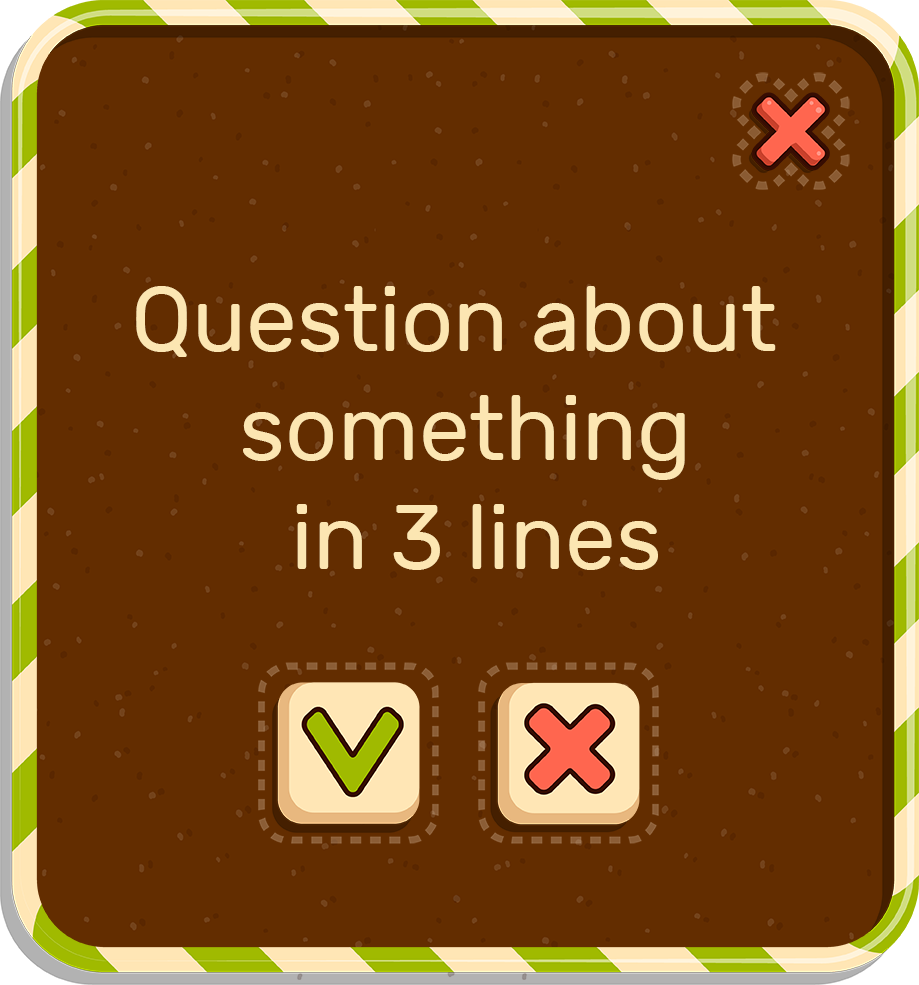
<style>
.page{position:relative;width:919px;height:985px;background:#632d00}
.page>*{position:absolute;margin:0}
.t1{font:90.8px "Rubik-Regular";color:#fce6b2}
</style>
<div class="page">
<p class="t1" style="left:136px;top:286px;width:640px;height:284px;text-align:center">Question about <br>something<br> in 3 lines</p>
</div>
